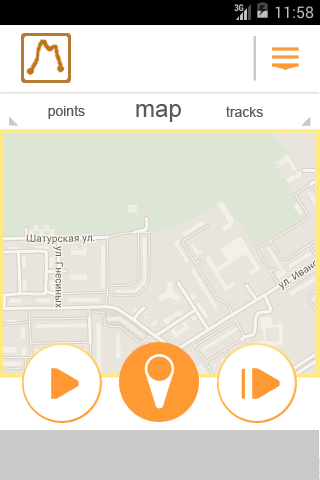
<style>
.page{position:relative;width:320px;height:480px;background:#ffffff}
.page>*{position:absolute;margin:0}
.t1{font:14px "ArialMT";color:#5a5a5a}
.t2{font:24px "ArialMT";color:#5a5a5a}
</style>
<div class="page">
<p class="t1" style="left:48px;top:105px;width:37px;height:14px">points</p>
<p class="t2" style="left:136px;top:104px;width:45px;height:18px">map</p>
<p class="t1" style="left:226px;top:106px;width:37px;height:11px">tracks</p>
</div>
